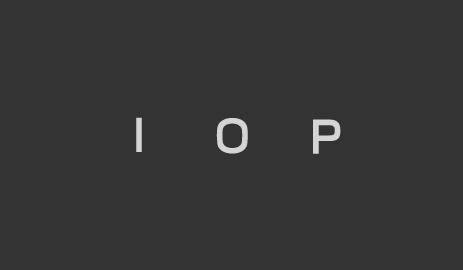
<style>
.page{position:relative;width:463px;height:270px;background:#333333}
.page>*{position:absolute;margin:0}
.t1{font:60px "SuperspaceBold";color:#d4d4d4}
</style>
<div class="page">
<p class="t1" style="left:136px;top:117px;width:6px;height:35px">I</p>
<p class="t1" style="left:216px;top:118px;width:32px;height:36px">O</p>
<p class="t1" style="left:313px;top:119px;width:28px;height:35px">P</p>
</div>
